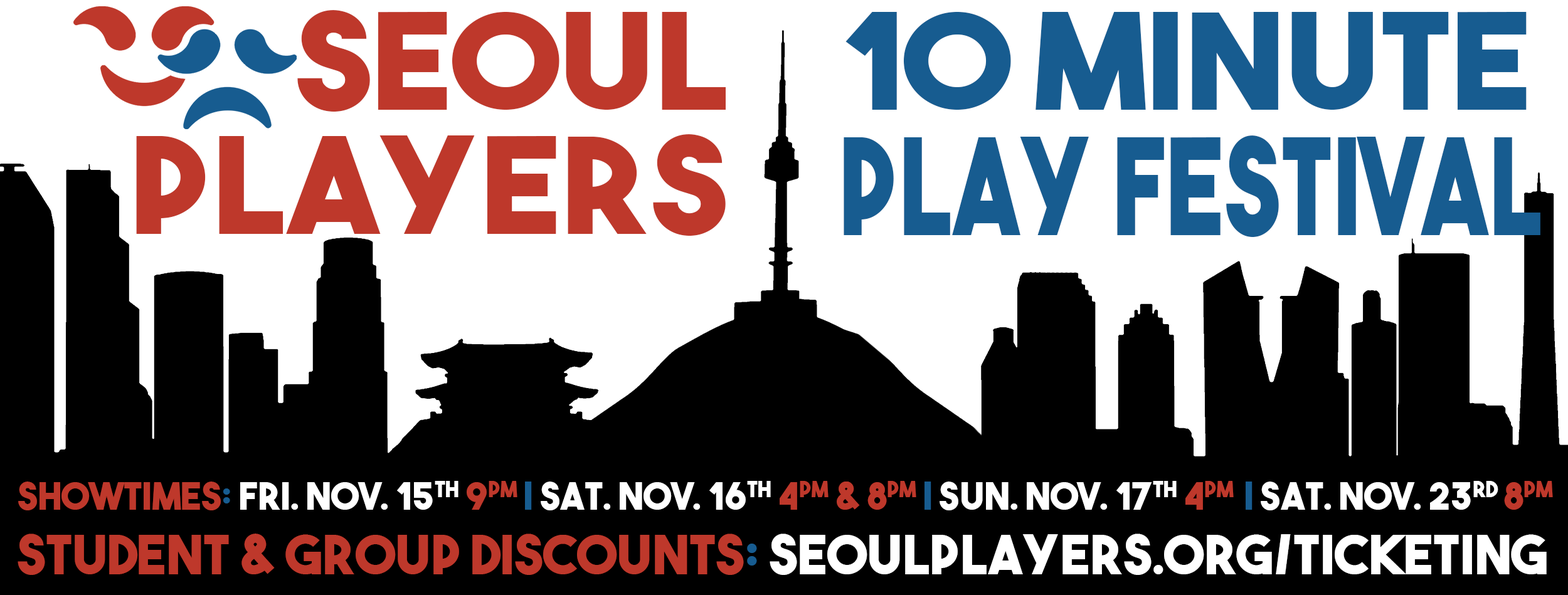
<style>
.page{position:relative;width:1568px;height:595px;background:#ffffff}
.page>*{position:absolute;margin:0}
.t1{font:133.1px/123.7px "TheBoldFont";color:#be382b;scale:1.09 1}
.t2{font:133.1px "TheBoldFont";color:#175c90;scale:1.09 1}
.t3{font:133.1px "TheBoldFont";color:#175c90;scale:0.79 1}
.t4{font:37.6px "TheBoldFont";color:#ffffff}
.t5{font:37.6px "TheBoldFont";color:#be382b}
.t6{font:37.6px "TheBoldFont";color:#175c90}
.t7{font:53.9px "TheBoldFont";color:#ffffff}
.t8{font:53.9px "TheBoldFont";color:#be382b}
.t9{font:53.9px "TheBoldFont";color:#175c90}
</style>
<div class="page">
<p class="t1" style="left:136px;top:10px;width:590px;height:226px;text-align:right">Seoul<br>Players</p>
<p class="t2" style="left:845px;top:12px;width:682px;height:98px">10 minute</p>
<p class="t3" style="left:844px;top:135px;width:696px;height:102px">play festival</p>
<p class="t4" style="left:18px;top:481px;width:1535px;height:30px"><span class="t5">showtimes</span><span class="t6">: </span>fri. nov. 15th <span class="t5">9PM </span><span class="t6">|</span> sat. nov. 16th <span class="t5">4PM &amp; 8PM </span><span class="t6">|</span> sun. nov. 17th <span class="t5">4PM  </span><span class="t6">|</span> sat. nov. 23rd <span class="t5">8PM</span></p>
<p class="t7" style="left:18px;top:534px;width:1529px;height:41px"><span class="t8">student &amp; Group Discounts</span><span class="t9">: </span>seoulplayers.org/ticketing</p>
</div>
